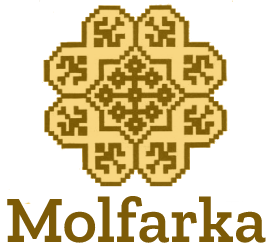
<style>
.page{position:relative;width:273px;height:247px;background:#ffffff}
.page>*{position:absolute;margin:0}
.t1{font:66px "ZillaSlab-SemiBold";color:#7d5b07}
</style>
<div class="page">
<p class="t1" style="left:7px;top:195px;width:259px;height:48px">Molfarka</p>
</div>
